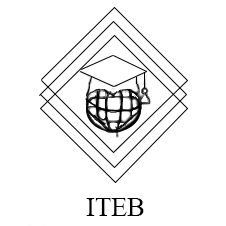
<style>
.page{position:relative;width:226px;height:226px;background:#ffffff}
.page>*{position:absolute;margin:0}
.t1{font:39.7px "Microsoft-Himalaya";color:#000000}
</style>
<div class="page">
<p class="t1" style="left:86px;top:198px;width:58px;height:18px">ITEB</p>
</div>
